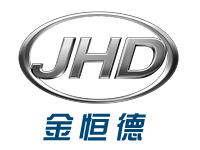
<style>
.page{position:relative;width:200px;height:150px;background:#ffffff}
.page>*{position:absolute;margin:0}
.t1{font:30px "HYk1gj";letter-spacing:0.2em;color:#004775;font-style:italic}
</style>
<div class="page">
<p class="t1" style="left:43px;top:113px;width:103px;height:28px">金恒德</p>
</div>
